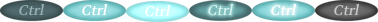
<style>
.page{position:relative;width:378px;height:22px}
.page>*{position:absolute;margin:0}
.t1{font:16px "OfficialFateFont-Medium";color:#97b2b3;font-weight:bold;font-style:italic}
.t2{font:16px "OfficialFateFont-Medium";color:#ffffff;font-weight:bold;font-style:italic}
.t3{font:16px "OfficialFateFont-Medium";color:#d6f5f2;font-weight:bold;font-style:italic}
.t4{font:16px "OfficialFateFont-Medium";color:#cacaca;font-weight:bold;font-style:italic}
</style>
<div class="page">
<p class="t1" style="left:19px;top:4px;width:26px;height:12px">Ctrl</p>
<p class="t2" style="left:82px;top:4px;width:26px;height:12px">Ctrl</p>
<p class="t2" style="left:145px;top:5px;width:26px;height:12px">Ctrl</p>
<p class="t3" style="left:208px;top:4px;width:26px;height:12px">Ctrl</p>
<p class="t2" style="left:271px;top:4px;width:26px;height:12px">Ctrl</p>
<p class="t4" style="left:334px;top:4px;width:26px;height:12px">Ctrl</p>
</div>
